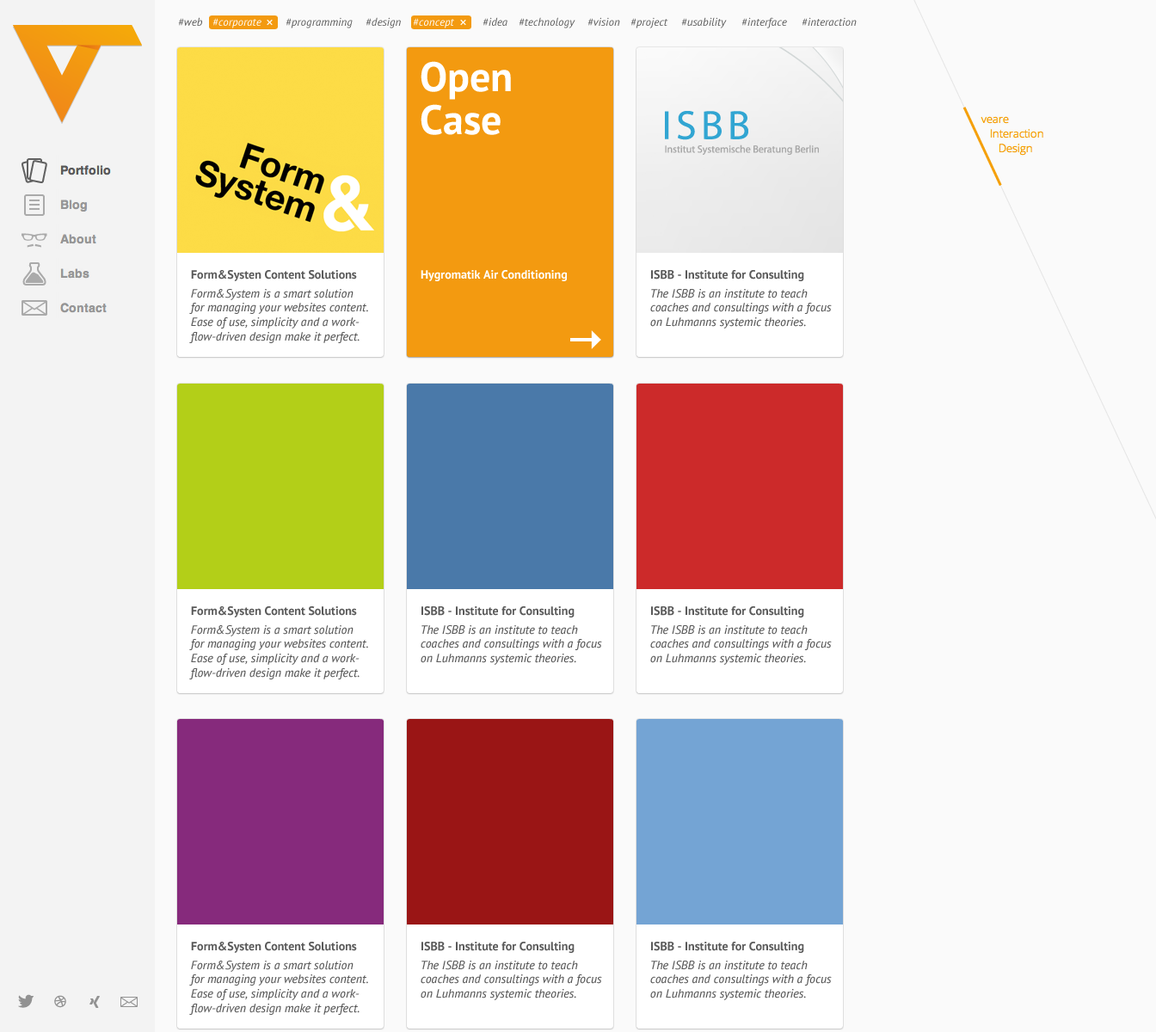
<style>
.page{position:relative;width:1156px;height:1032px;background:#fafafa}
.page>*{position:absolute;margin:0}
.t1{font:11.2px "PTSans-Italic";color:#5a5a5a}
.t2{font:11.2px "PTSans-Italic";color:#ffffff}
.t3{font:15.5px "PTSans-Italic";color:#ffffff}
.t4{font:41.3px/43px "PTSans-Bold";color:#ffffff}
.t5{font:12px "PTSans-Bold";color:#5a5a5a}
.t6{font:12px "PTSans-Bold";color:#ffffff}
.t7{font:12px "PTSans-Italic";color:#5a5a5a}
</style>
<div class="page">
<p class="t1" style="left:178px;top:17px;width:24px;height:9px">#web</p>
<p class="t1" style="left:285px;top:17px;width:68px;height:11px">#programming</p>
<p class="t1" style="left:365px;top:17px;width:36px;height:11px">#design</p>
<p class="t1" style="left:482px;top:17px;width:25px;height:9px">#idea</p>
<p class="t1" style="left:518px;top:17px;width:57px;height:11px">#technology</p>
<p class="t1" style="left:587px;top:17px;width:33px;height:9px">#vision</p>
<p class="t1" style="left:630px;top:17px;width:38px;height:11px">#project</p>
<p class="t1" style="left:681px;top:17px;width:46px;height:11px">#usability</p>
<p class="t1" style="left:741px;top:17px;width:46px;height:11px">#interface</p>
<p class="t1" style="left:801px;top:17px;width:55px;height:9px">#interaction</p>
<p class="t2" style="left:212px;top:18px;width:49px;height:10px">#corporate</p>
<p class="t3" style="left:267px;top:19px;width:6px;height:7px">×</p>
<p class="t2" style="left:413px;top:18px;width:41px;height:10px">#concept</p>
<p class="t3" style="left:460px;top:19px;width:6px;height:7px">×</p>
<p class="t4" style="left:420px;top:61px;width:91px;height:74px">Open<br>Case</p>
<p class="t5" style="left:191px;top:270px;width:166px;height:11px">Form&amp;Systen Content Solutions</p>
<p class="t6" style="left:420px;top:270px;width:147px;height:11px">Hygromatik Air Conditioning</p>
<p class="t5" style="left:651px;top:270px;width:153px;height:11px">ISBB - Institute for Consulting</p>
<p class="t7" style="left:189px;top:289px;width:179px;height:54px">Form&amp;System is a smart solution<br>for managing your websites content.<br>Ease of use, simplicity and a work-<br>flow-driven design make it perfect.</p>
<p class="t7" style="left:650px;top:289px;width:181px;height:39px">The ISBB is an institute to teach <br>coaches and consultings with a focus<br>on Luhmanns systemic theories.</p>
<p class="t5" style="left:191px;top:606px;width:166px;height:11px">Form&amp;Systen Content Solutions</p>
<p class="t5" style="left:421px;top:606px;width:153px;height:11px">ISBB - Institute for Consulting</p>
<p class="t5" style="left:651px;top:606px;width:153px;height:11px">ISBB - Institute for Consulting</p>
<p class="t7" style="left:189px;top:625px;width:179px;height:54px">Form&amp;System is a smart solution<br>for managing your websites content.<br>Ease of use, simplicity and a work-<br>flow-driven design make it perfect.</p>
<p class="t7" style="left:420px;top:625px;width:182px;height:40px">The ISBB is an institute to teach <br>coaches and consultings with a focus<br>on Luhmanns systemic theories.</p>
<p class="t7" style="left:650px;top:625px;width:181px;height:40px">The ISBB is an institute to teach <br>coaches and consultings with a focus<br>on Luhmanns systemic theories.</p>
<p class="t5" style="left:191px;top:942px;width:166px;height:11px">Form&amp;Systen Content Solutions</p>
<p class="t5" style="left:421px;top:942px;width:153px;height:11px">ISBB - Institute for Consulting</p>
<p class="t5" style="left:651px;top:942px;width:153px;height:11px">ISBB - Institute for Consulting</p>
<p class="t7" style="left:189px;top:960px;width:179px;height:55px">Form&amp;System is a smart solution<br>for managing your websites content.<br>Ease of use, simplicity and a work-<br>flow-driven design make it perfect.</p>
<p class="t7" style="left:420px;top:960px;width:182px;height:40px">The ISBB is an institute to teach <br>coaches and consultings with a focus<br>on Luhmanns systemic theories.</p>
<p class="t7" style="left:650px;top:960px;width:181px;height:40px">The ISBB is an institute to teach <br>coaches and consultings with a focus<br>on Luhmanns systemic theories.</p>
</div>
